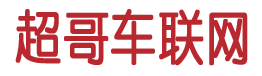
<style>
.page{position:relative;width:262px;height:76px;background:#ffffff}
.page>*{position:absolute;margin:0}
.t1{font:57.6px "STYuanti-SC-Regular";letter-spacing:0.025em;color:#b9282e;font-weight:bold;scale:0.78 1}
</style>
<div class="page">
<p class="t1" style="left:15px;top:9px;width:233px;height:57px">超哥车联网</p>
</div>
